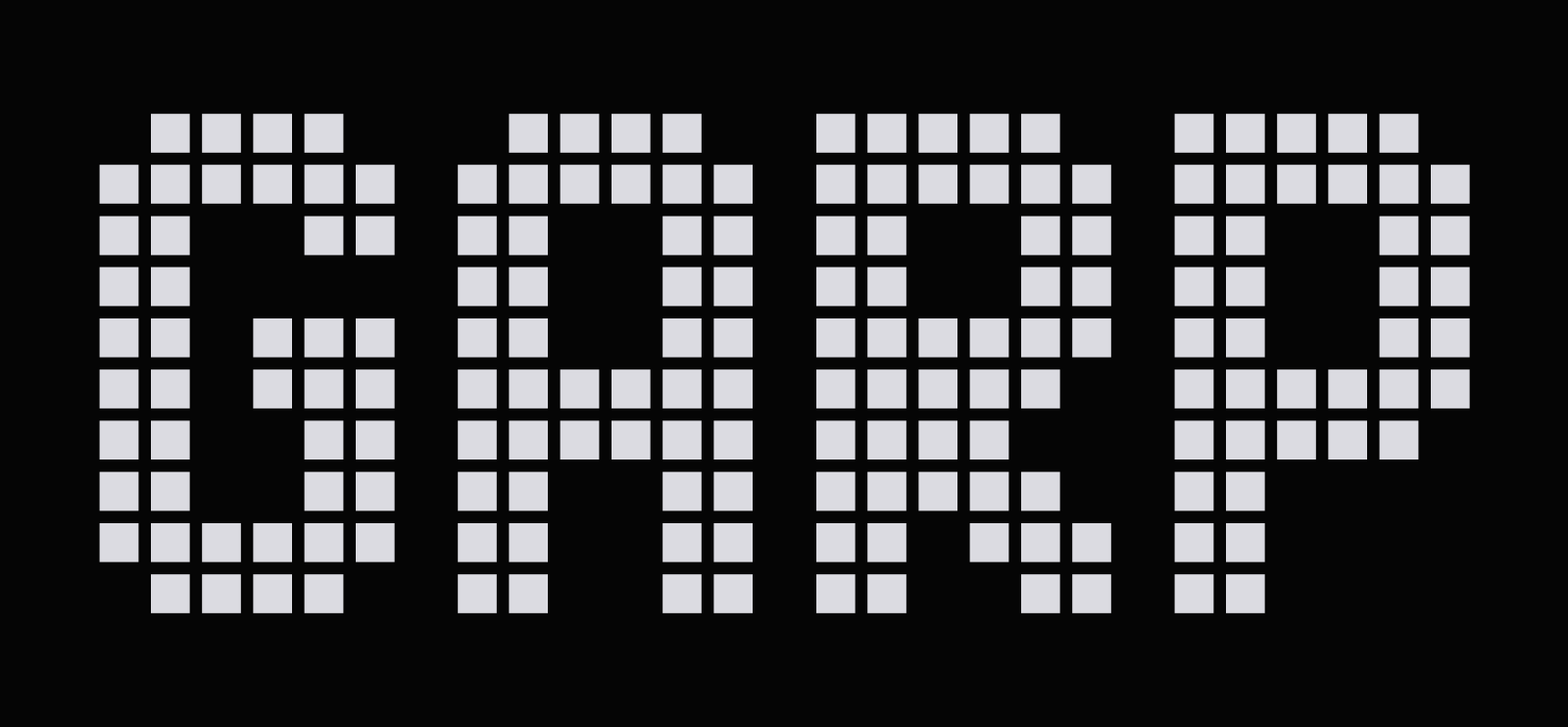
<style>
.page{position:relative;width:1568px;height:727px;background:#050505}
.page>*{position:absolute;margin:0}
.t1{font:639.9px "AdvancedLEDBoard-7";color:#dbdbe1}
</style>
<div class="page">
<p class="t1" style="left:99px;top:114px;width:1371px;height:499px">GARP</p>
</div>
